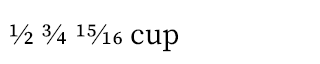
<style>
.page{position:relative;width:320px;height:64px;background:#ffffff}
.page>*{position:absolute;margin:0}
.t1{font:30px "SourceSerifRoman-Regular";color:#000000}
</style>
<div class="page">
<p class="t1" style="left:10px;top:24px;width:169px;height:28px">1/2 3/4 15/16 cup</p>
</div>
